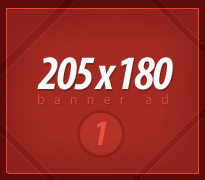
<style>
.page{position:relative;width:205px;height:180px}
.page>*{position:absolute;margin:0}
.t1{font:48px "MyriadPro-BoldCondIt";letter-spacing:-0.05em;color:#ffffff}
.t2{font:14px "MyriadPro-Regular";letter-spacing:0.65em;color:#db4437}
.t3{font:36px "MyriadPro-BoldCondIt";letter-spacing:-0.05em;color:#e75443}
</style>
<div class="page">
<p class="t1" style="left:37px;top:57px;width:136px;height:33px">205 x 180</p>
<p class="t2" style="left:38px;top:94px;width:131px;height:10px">banner ad</p>
<p class="t3" style="left:97px;top:121px;width:10px;height:24px">1</p>
</div>
